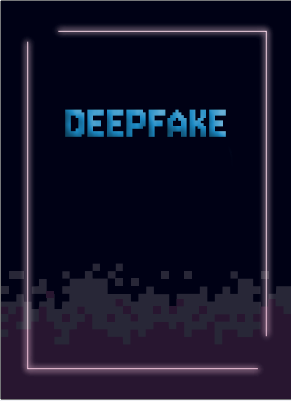
<style>
.page{position:relative;width:291px;height:401px;background:#000115}
.page>*{position:absolute;margin:0}
.t1{font:50px "Jersey10-Regular";letter-spacing:0.025em}
</style>
<div class="page">
<p class="t1" style="left:65px;top:109px;width:161px;height:28px">DEEPFAKE</p>
</div>
